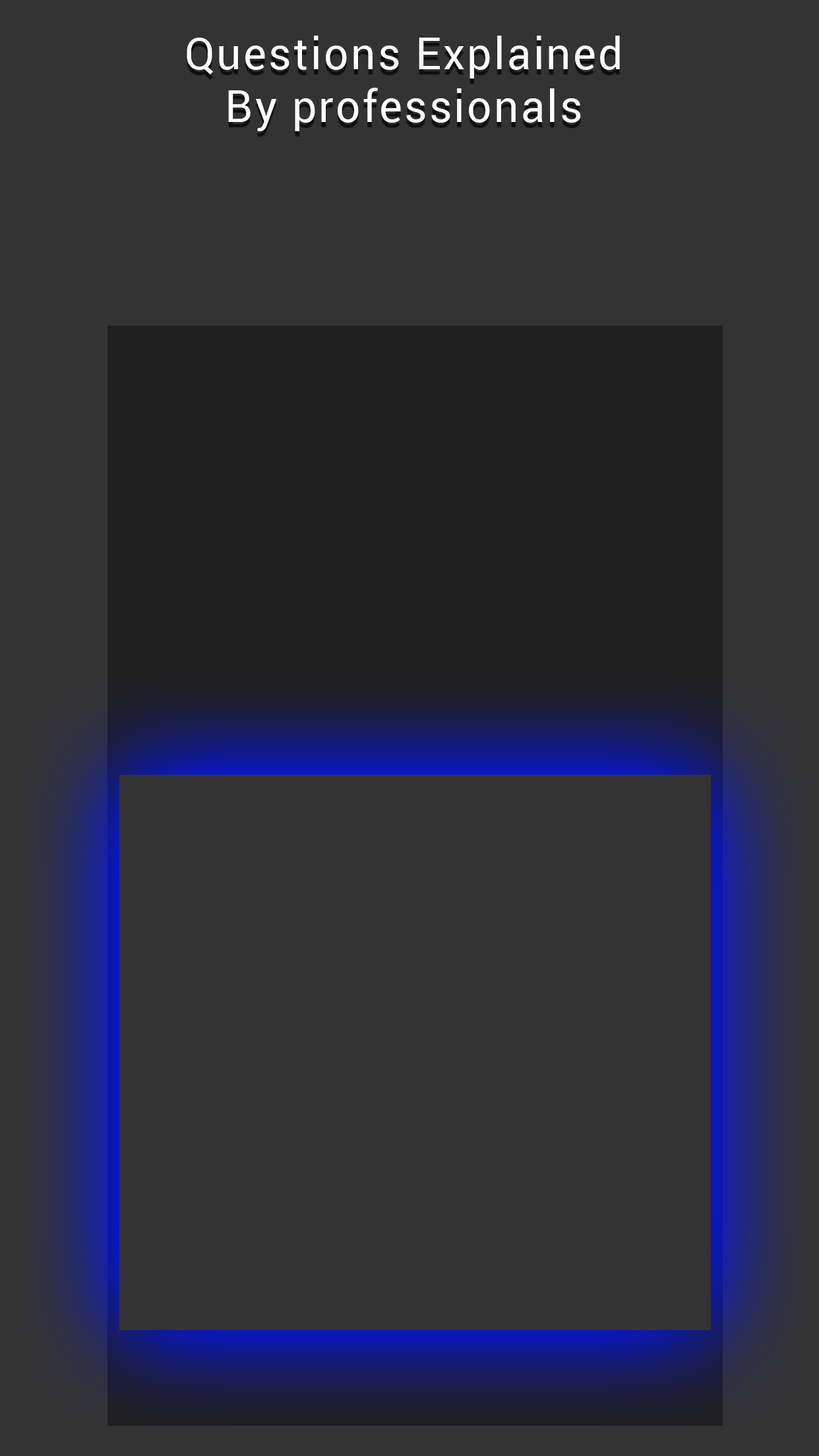
<style>
.page{position:relative;width:819px;height:1456px;background:#333333}
.page>*{position:absolute;margin:0}
.t1{font:44px "Roboto-Regular";letter-spacing:0.05em;color:#ffffff}
</style>
<div class="page">
<p class="t1" style="left:187px;top:36px;width:433px;height:95px;text-align:center">Questions Explained<br>By professionals</p>
</div>
